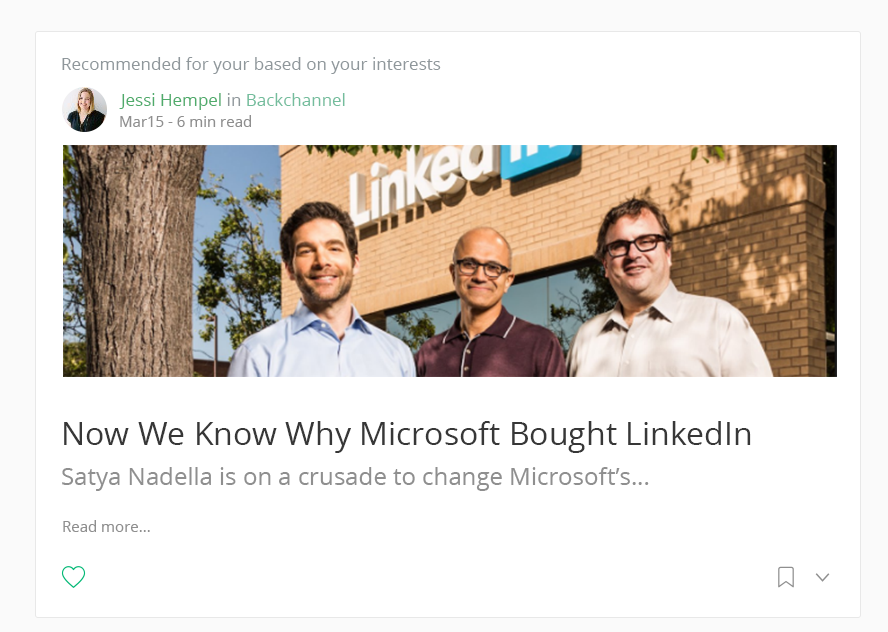
<style>
.page{position:relative;width:888px;height:632px;background:#ffffff}
.page>*{position:absolute;margin:0}
.t1{font:17px "OpenSans";color:#8f979b}
.t2{font:17px "OpenSans";color:#4fab6b}
.t3{font:17px "OpenSans";color:#73bd9e}
.t4{font:15px "OpenSans";color:#8f8f8f}
.t5{font:32px "OpenSans";color:#373737}
.t6{font:24px "OpenSans";color:#8f8f8f}
</style>
<div class="page">
<p class="t1" style="left:62px;top:57px;width:379px;height:17px">Recommended for your based on your interests</p>
<p class="t2" style="left:119px;top:93px;width:226px;height:17px">Jessi Hempel<span class="t1"> in</span><span class="t3"> Backchannel</span></p>
<p class="t4" style="left:120px;top:115px;width:131px;height:12px">Mar15 - 6 min read</p>
<p class="t5" style="left:64px;top:421px;width:687px;height:32px">Now We Know Why Microsoft Bought LinkedIn</p>
<p class="t6" style="left:62px;top:467px;width:587px;height:24px">Satya Nadella is on a crusade to change Microsoft’s...</p>
<p class="t4" style="left:63px;top:520px;width:87px;height:12px">Read more...</p>
</div>
